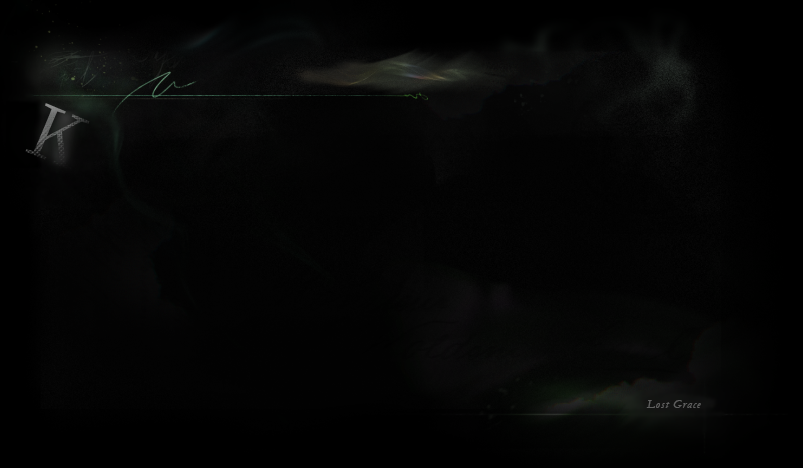
<style>
.page{position:relative;width:803px;height:468px}
.page>*{position:absolute;margin:0}
.t1{font:12px "Garamond-Italic";letter-spacing:0.075em;color:#5f605f}
</style>
<div class="page">
<p class="t1" style="left:646px;top:400px;width:55px;height:8px">Lost Grace</p>
</div>
